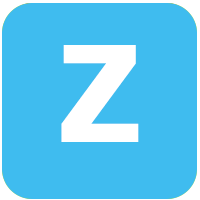
<style>
.page{position:relative;width:200px;height:200px;background:#3fbcef}
.page>*{position:absolute;margin:0}
.t1{font:133.3px "Tahoma-Bold";letter-spacing:0.2em;color:#ffffff;text-transform:uppercase}
</style>
<div class="page">
<p class="t1" style="left:53px;top:45px;width:93px;height:97px">X</p>
<p class="t1" style="left:61px;top:45px;width:78px;height:97px">Z</p>
</div>
